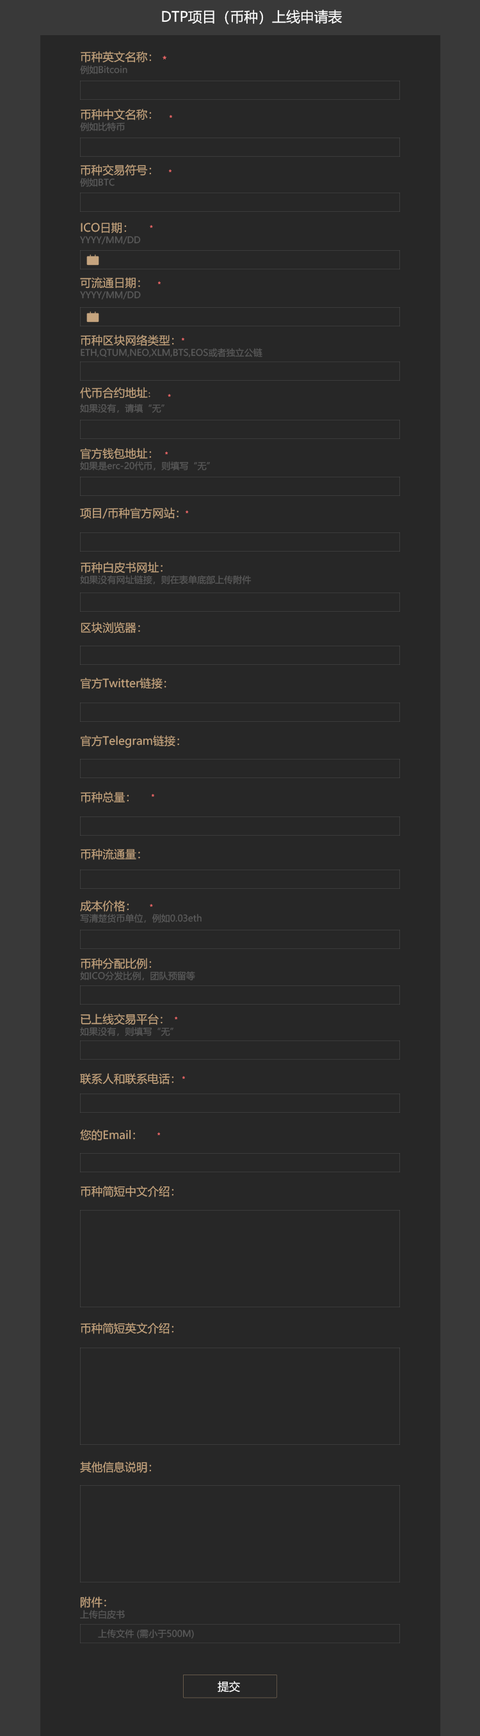
<style>
.page{position:relative;width:480px;height:1736px;background:#272727}
.page>*{position:absolute;margin:0}
.t1{font:14px "MicrosoftYaHei";color:#fefefe}
.t2{font:11.2px "MicrosoftYaHei";color:#c5a47e}
.t3{font:9px "MicrosoftYaHei";color:#5a5a5a}
.t4{font:9px "MicrosoftYaHei";color:#ff6f6f}
.t5{font:6.7px "MicrosoftYaHei"}
.t6{font:6.7px "MicrosoftYaHei";color:#ff6f6f}
.t7{font:7.5px "MicrosoftYaHei";color:#c5a47e}
.t8{font:11.2px "MicrosoftYaHei";color:#ffffff}
</style>
<div class="page">
<p class="t1" style="left:162px;top:10px;width:180px;height:14px">DTP项目（币种）上线申请表</p>
<p class="t2" style="left:81px;top:51px;width:71px;height:12px">币种英文名称：</p>
<p class="t3" style="left:80px;top:65px;width:47px;height:9px">例如Bitcoin</p>
<p class="t4" style="left:163px;top:56px;width:3px;height:4px">*</p>
<p class="t2" style="left:81px;top:109px;width:71px;height:11px">币种中文名称：</p>
<p class="t3" style="left:80px;top:122px;width:45px;height:9px">例如比特币</p>
<p class="t5" style="left:169px;top:115px;width:3px;height:3px">*</p>
<p class="t2" style="left:81px;top:164px;width:71px;height:12px">币种交易符号：</p>
<p class="t5" style="left:168px;top:169px;width:3px;height:3px">*</p>
<p class="t3" style="left:80px;top:178px;width:35px;height:9px">例如BTC</p>
<p class="t2" style="left:81px;top:222px;width:46px;height:12px">ICO日期：</p>
<p class="t6" style="left:150px;top:225px;width:3px;height:3px">*</p>
<p class="t3" style="left:80px;top:236px;width:61px;height:8px">YYYY/MM/DD</p>
<p class="t2" style="left:80px;top:277px;width:60px;height:12px">可流通日期：</p>
<p class="t5" style="left:157px;top:281px;width:4px;height:3px">*</p>
<p class="t3" style="left:80px;top:291px;width:61px;height:8px">YYYY/MM/DD</p>
<p class="t2" style="left:81px;top:335px;width:93px;height:11px">币种区块网络类型：</p>
<p class="t5" style="left:181px;top:337px;width:3px;height:3px">*</p>
<p class="t3" style="left:81px;top:348px;width:181px;height:10px">ETH,QTUM,NEO,XLM,BTS,EOS或者独立公链</p>
<p class="t2" style="left:80px;top:387px;width:70px;height:12px">代币合约地址<span class="t7">：</span></p>
<p class="t6" style="left:168px;top:394px;width:3px;height:3px">*</p>
<p class="t3" style="left:80px;top:404px;width:84px;height:9px">如果没有，请填“无”</p>
<p class="t2" style="left:80px;top:448px;width:72px;height:11px">官方钱包地址：</p>
<p class="t3" style="left:80px;top:461px;width:130px;height:10px">如果是erc-20代币，则填写“无”</p>
<p class="t5" style="left:165px;top:451px;width:3px;height:3px">*</p>
<p class="t2" style="left:80px;top:507px;width:99px;height:12px">项目/币种官方网站：</p>
<p class="t5" style="left:186px;top:510px;width:3px;height:3px">*</p>
<p class="t2" style="left:81px;top:562px;width:82px;height:11px">币种白皮书网址：</p>
<p class="t3" style="left:80px;top:575px;width:171px;height:10px">如果没有网址链接，则在表单底部上传附件</p>
<p class="t2" style="left:81px;top:622px;width:59px;height:12px">区块浏览器：</p>
<p class="t2" style="left:81px;top:678px;width:85px;height:11px">官方Twitter链接：</p>
<p class="t2" style="left:81px;top:735px;width:98px;height:13px">官方Telegram链接：</p>
<p class="t2" style="left:81px;top:792px;width:48px;height:11px">币种总量：</p>
<p class="t5" style="left:151px;top:794px;width:3px;height:3px">*</p>
<p class="t2" style="left:81px;top:849px;width:59px;height:11px">币种流通量：</p>
<p class="t2" style="left:80px;top:900px;width:49px;height:12px">成本价格：</p>
<p class="t6" style="left:150px;top:904px;width:3px;height:3px">*</p>
<p class="t3" style="left:80px;top:914px;width:122px;height:9px">写清楚货币单位，例如0.03eth</p>
<p class="t2" style="left:81px;top:958px;width:71px;height:11px">币种分配比例：</p>
<p class="t3" style="left:80px;top:971px;width:115px;height:10px">如ICO分发比例，团队预留等</p>
<p class="t2" style="left:81px;top:1014px;width:82px;height:11px">已上线交易平台：</p>
<p class="t5" style="left:175px;top:1016px;width:3px;height:3px">*</p>
<p class="t3" style="left:80px;top:1027px;width:93px;height:10px">如果没有，则填写“无”</p>
<p class="t2" style="left:80px;top:1073px;width:94px;height:12px">联系人和联系电话：</p>
<p class="t5" style="left:182px;top:1076px;width:3px;height:3px">*</p>
<p class="t2" style="left:80px;top:1129px;width:55px;height:12px">您的Email：</p>
<p class="t5" style="left:157px;top:1132px;width:4px;height:3px">*</p>
<p class="t2" style="left:81px;top:1186px;width:93px;height:11px">币种简短中文介绍：</p>
<p class="t2" style="left:81px;top:1323px;width:93px;height:11px">币种简短英文介绍：</p>
<p class="t2" style="left:80px;top:1462px;width:72px;height:11px">其他信息说明：</p>
<p class="t2" style="left:80px;top:1597px;width:26px;height:11px">附件：</p>
<p class="t3" style="left:80px;top:1610px;width:45px;height:9px">上传白皮书</p>
<p class="t3" style="left:98px;top:1629px;width:96px;height:10px">上传文件 (需小于500M)</p>
<p class="t8" style="left:218px;top:1681px;width:22px;height:12px">提交</p>
</div>
